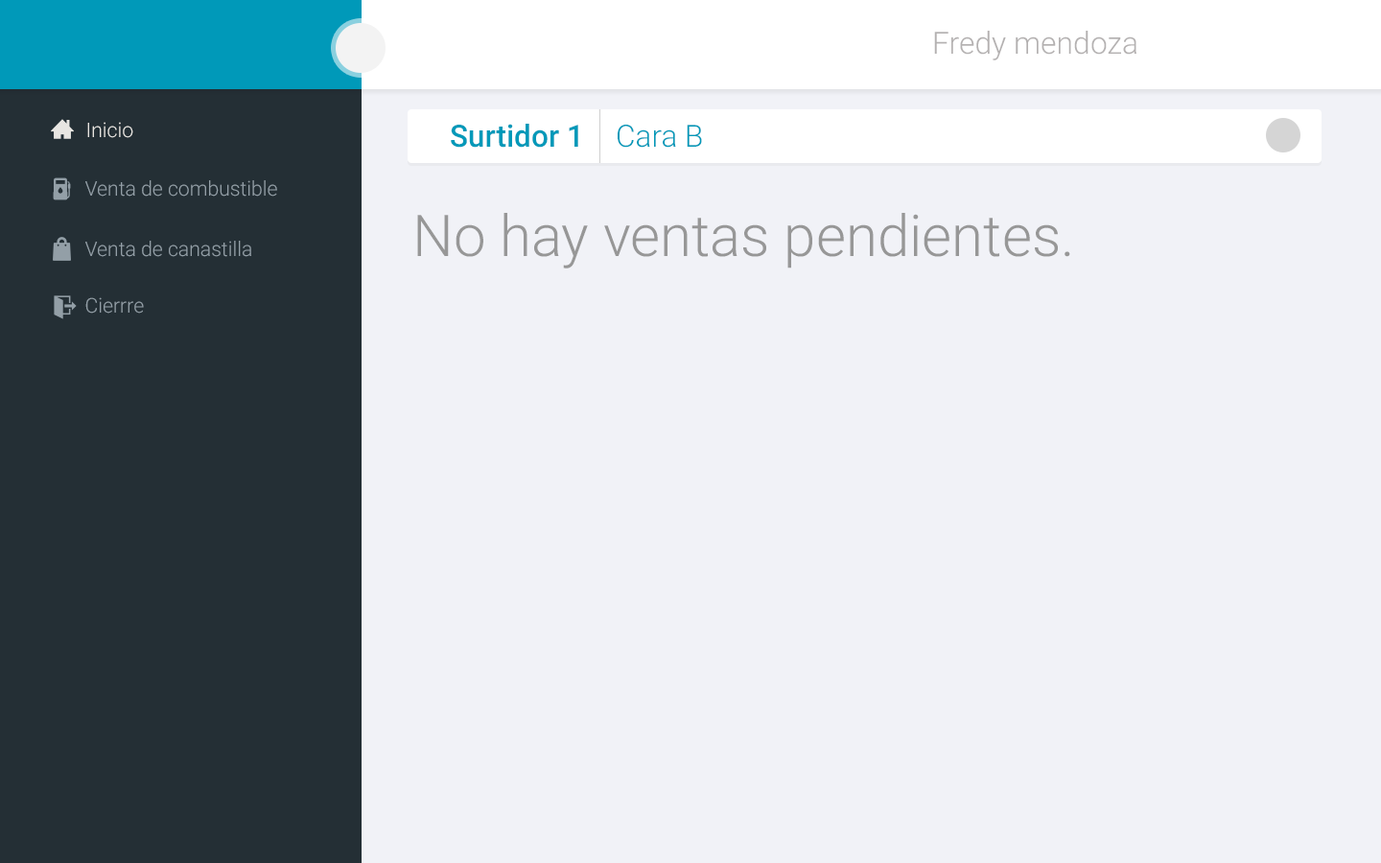
<style>
.page{position:relative;width:1381px;height:863px;background:#f1f2f7}
.page>*{position:absolute;margin:0}
.t1{font:30.7px "Roboto-Light";color:#b4b1b1}
.t2{font:20.3px "Roboto-Light";color:#e8e6e2}
.t3{font:30.7px "Roboto-Medium";color:#0099b9}
.t4{font:30.7px "Roboto-Light";color:#0099b9}
.t5{font:20.3px "Roboto-Light";color:#939fa7}
.t6{font:57.6px "Roboto-Light";color:#989898}
</style>
<div class="page">
<p class="t1" style="left:934px;top:31px;width:203px;height:29px">Fredy mendoza</p>
<p class="t2" style="left:87px;top:122px;width:46px;height:16px">Inicio</p>
<p class="t3" style="left:451px;top:124px;width:127px;height:24px">Surtidor 1</p>
<p class="t4" style="left:618px;top:125px;width:84px;height:23px">Cara B</p>
<p class="t5" style="left:85px;top:180px;width:192px;height:17px">Venta de combustible</p>
<p class="t6" style="left:417px;top:213px;width:653px;height:56px">No hay ventas pendientes.</p>
<p class="t5" style="left:85px;top:241px;width:166px;height:16px">Venta de canastilla</p>
<p class="t5" style="left:85px;top:297px;width:59px;height:17px">Cierrre</p>
</div>
